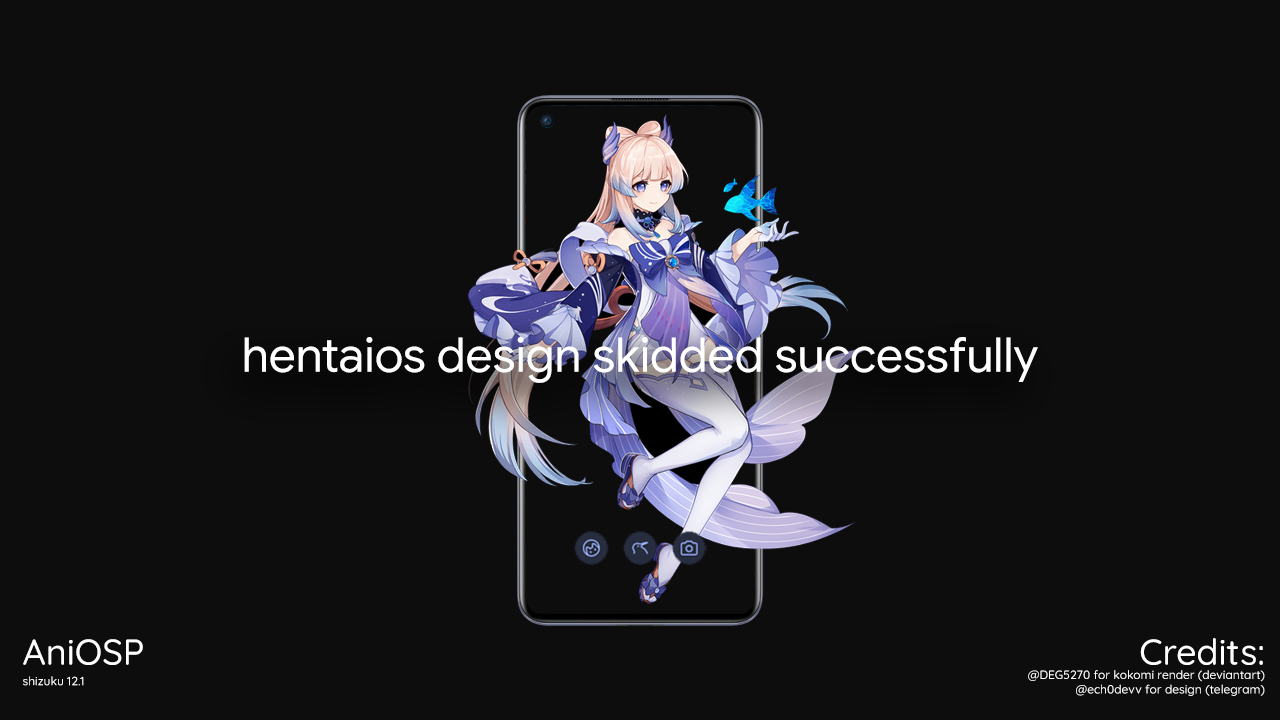
<style>
.page{position:relative;width:1280px;height:720px;background:#0d0d0d}
.page>*{position:absolute;margin:0}
.t1{font:48px "GoogleSans-Regular";color:#ffffff}
.t2{font:36px "Quicksand-Medium";color:#ffffff}
.t3{font:12px "Quicksand-Medium";color:#ffffff}
</style>
<div class="page">
<p class="t1" style="left:244px;top:337px;width:794px;height:46px">hentaios design skidded successfully</p>
<p class="t2" style="left:23px;top:639px;width:120px;height:26px">AniOSP</p>
<p class="t3" style="left:1028px;top:638px;width:237px;height:58px;text-align:right"><span class="t2">Credits:<br></span>@DEG5270 for kokomi render (deviantart)<br>@ech0devv for design (telegram)</p>
<p class="t3" style="left:23px;top:676px;width:61px;height:10px">shizuku 12.1</p>
</div>
